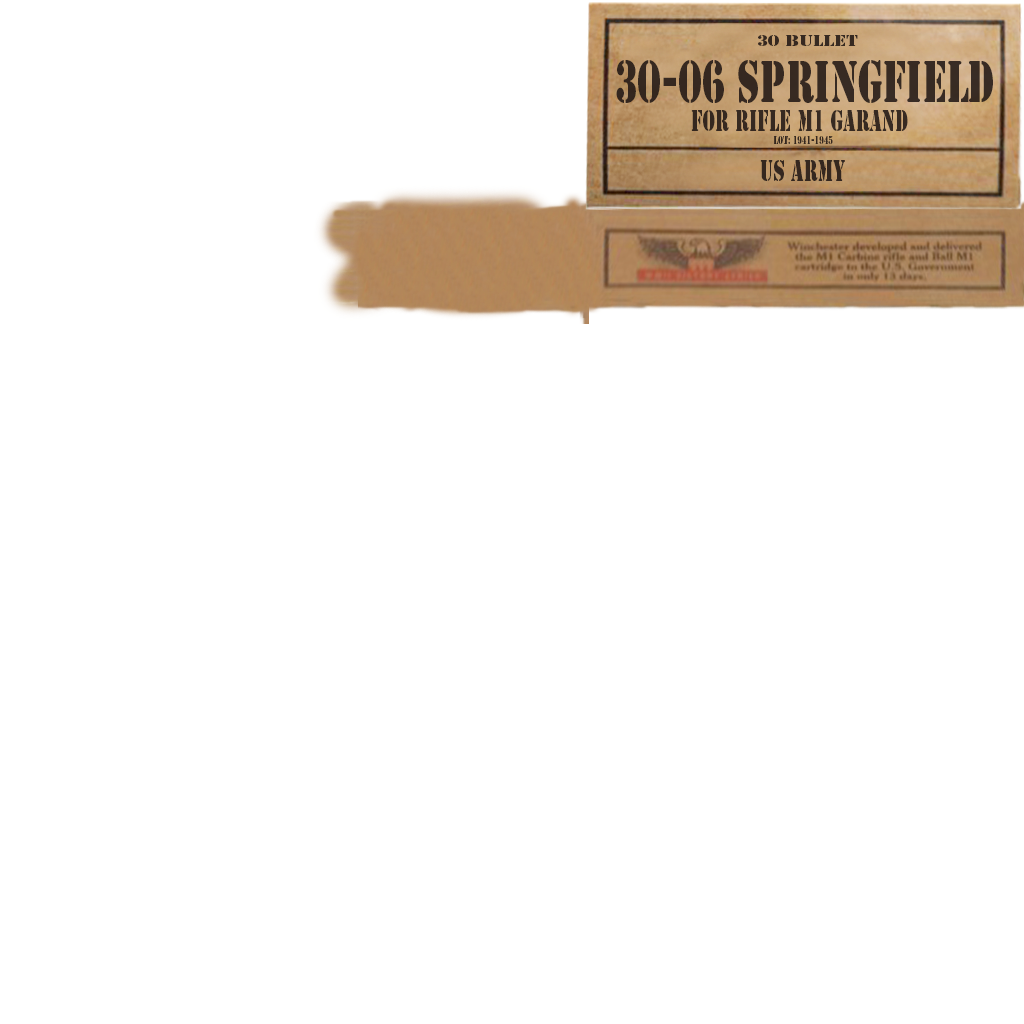
<style>
.page{position:relative;width:1024px;height:1024px;background:#ffffff}
.page>*{position:absolute;margin:0}
.t1{font:14.5px "StencilStd";letter-spacing:0.01em;color:#201615;scale:1.22 1}
.t2{font:54.3px "StencilStd";letter-spacing:0.01em;color:#201615;scale:0.66 1}
.t3{font:26.8px "StencilStd";letter-spacing:0.01em;color:#201615;scale:0.66 1}
.t4{font:10.7px "StencilStd";letter-spacing:0.01em;color:#201615;scale:0.66 1}
</style>
<div class="page">
<p class="t1" style="left:758px;top:35px;width:100px;height:11px;opacity:0.92">30 Bullet</p>
<p class="t2" style="left:616px;top:60px;width:377px;height:43px;opacity:0.92">30-06 Springfield</p>
<p class="t3" style="left:691px;top:110px;width:217px;height:21px;opacity:0.92">for rifle M1 Garand</p>
<p class="t4" style="left:773px;top:136px;width:60px;height:8px;opacity:0.92">lot: 1941-1945</p>
<p class="t3" style="left:760px;top:160px;width:85px;height:21px;opacity:0.92">us army</p>
</div>
